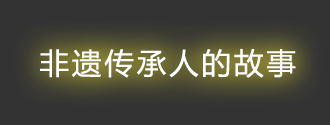
<style>
.page{position:relative;width:330px;height:125px;background:#333333}
.page>*{position:absolute;margin:0}
.t1{font:29.4px "MicrosoftYaHei";letter-spacing:0.1em;color:#ffffff}
</style>
<div class="page">
<p class="t1" style="left:40px;top:48px;width:256px;height:30px">非遗传承人的故事</p>
</div>
